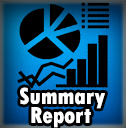
<style>
.page{position:relative;width:126px;height:128px;background:#000000}
.page>*{position:absolute;margin:0}
.t1{font:24px "TwCenMT-CondensedExtraBold";color:#ffffff}
</style>
<div class="page">
<p class="t1" style="left:20px;top:87px;width:85px;height:22px">Summary</p>
<p class="t1" style="left:31px;top:107px;width:60px;height:21px">Report</p>
</div>
